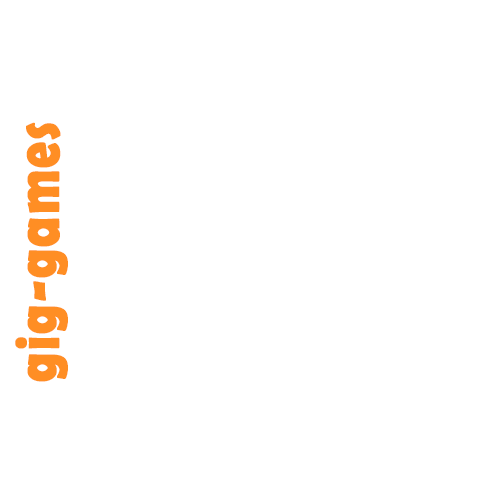
<style>
.page{position:relative;width:500px;height:500px;background:#ffffff}
.page>*{position:absolute;margin:0}
.t1{font:64px "BerlinSansFBDemi-Bold";letter-spacing:0.025em;color:#ff8e24;font-weight:bold;scale:0.79 1}
</style>
<div class="page">
<p class="t1" style="left:15px;top:122px;width:53px;height:260px;rotate:-90deg">gig-games</p>
</div>
